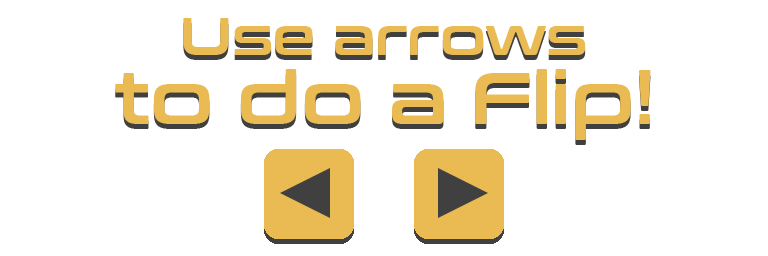
<style>
.page{position:relative;width:768px;height:256px;background:#ffffff}
.page>*{position:absolute;margin:0}
.t1{font:73.1px/100.1px "ConthraxSb-Regular";color:#e9bb52}
.t2{font:53.1px/100.1px "ConthraxSb-Regular";color:#e9bb52}
</style>
<div class="page">
<p class="t1" style="left:115px;top:18px;width:536px;height:122px;text-align:center"><span class="t2">Use arrows<br></span>to do a Flip!</p>
</div>
